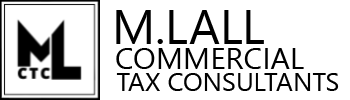
<style>
.page{position:relative;width:350px;height:100px;background:#ffffff}
.page>*{position:absolute;margin:0}
.t1{font:47.8px "SegoeUI";color:#000000}
.t2{font:30.4px "SegoeUI";color:#000000}
.t3{font:26px "SegoeUI";color:#000000;text-transform:uppercase}
</style>
<div class="page">
<p class="t1" style="left:116px;top:10px;width:148px;height:34px">M.LALL</p>
<p class="t2" style="left:116px;top:48px;width:188px;height:21px">COMMERCIAL</p>
<p class="t3" style="left:116px;top:73px;width:223px;height:18px">Tax Consultants</p>
</div>
